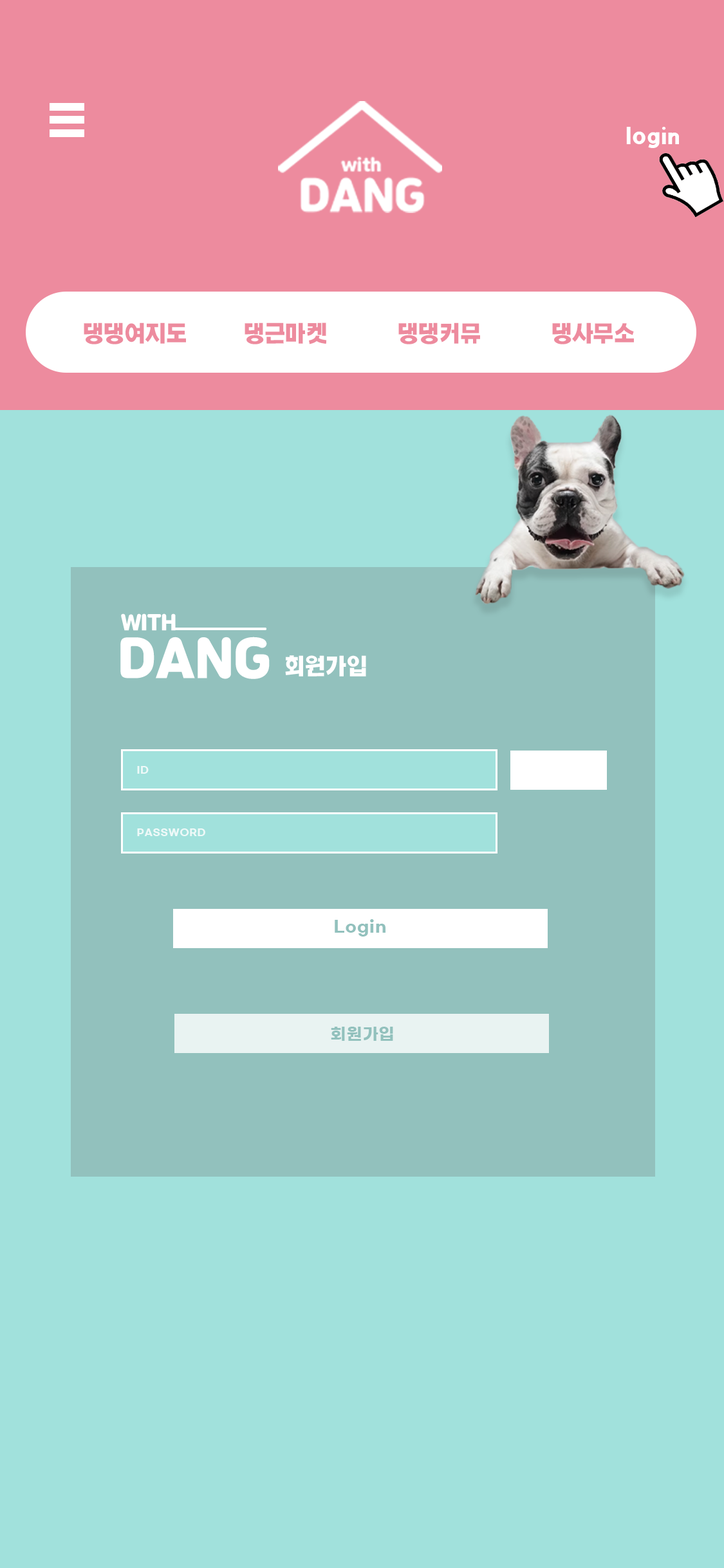
<style>
.page{position:relative;width:724px;height:1568px;background:#a1e1dc}
.page>*{position:absolute;margin:0}
.t1{font:21.2px "KOTRA_BOLD-Bold";color:#ffffff}
.t2{font:21.2px "KOTRA_BOLD-Bold";color:#ed8b9e}
.t3{font:20.3px/22.8px "JalnanOTF";color:#ffffff}
.t4{font:20.3px/22.8px "JalnanOTF";letter-spacing:-0.13em;color:#ffffff}
.t5{font:50.6px/22.8px "JalnanOTF";color:#ffffff}
.t6{font:9.7px/62.4px "GmarketSansTTFBold";letter-spacing:0.04em;color:#ffffff}
.t7{font:16.1px "GmarketSansTTFBold";letter-spacing:0.04em;color:#92c1bd}
</style>
<div class="page">
<p class="t1" style="left:626px;top:127px;width:53px;height:21px">login</p>
<p class="t2" style="left:84px;top:322px;width:102px;height:22px">댕댕여지도</p>
<p class="t2" style="left:245px;top:322px;width:82px;height:22px">댕근마켓</p>
<p class="t2" style="left:398px;top:322px;width:82px;height:22px">댕댕커뮤</p>
<p class="t2" style="left:552px;top:322px;width:82px;height:22px">댕사무소</p>
<p class="t3" style="left:120px;top:613px;width:150px;height:66px"><span class="t4"> </span>WITH<br><span class="t5">DANG</span></p>
<p class="t1" style="left:285px;top:655px;width:81px;height:22px">회원가입</p>
<p class="t6" style="left:137px;top:766px;width:68px;height:70px;opacity:0.8">ID<br>PASSWORD</p>
<p class="t7" style="left:335px;top:919px;width:51px;height:18px">Login</p>
<p class="t7" style="left:331px;top:1027px;width:62px;height:14px">회원가입</p>
</div>
